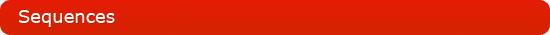
<style>
.page{position:relative;width:550px;height:35px}
.page>*{position:absolute;margin:0}
.t1{font:18px "Verdana";color:#ffffff}
</style>
<div class="page">
<p class="t1" style="left:19px;top:10px;width:96px;height:17px">Sequences</p>
</div>
